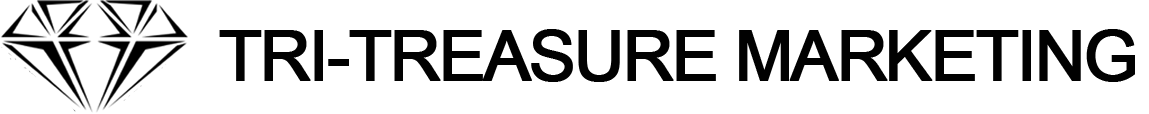
<style>
.page{position:relative;width:1149px;height:114px;background:#ffffff}
.page>*{position:absolute;margin:0}
.t1{font:70px "ArialMT";letter-spacing:-0.05em;color:#010101;text-transform:uppercase;font-weight:bold}
</style>
<div class="page">
<p class="t1" style="left:219px;top:29px;width:916px;height:53px">tri-treasure marketing</p>
</div>
